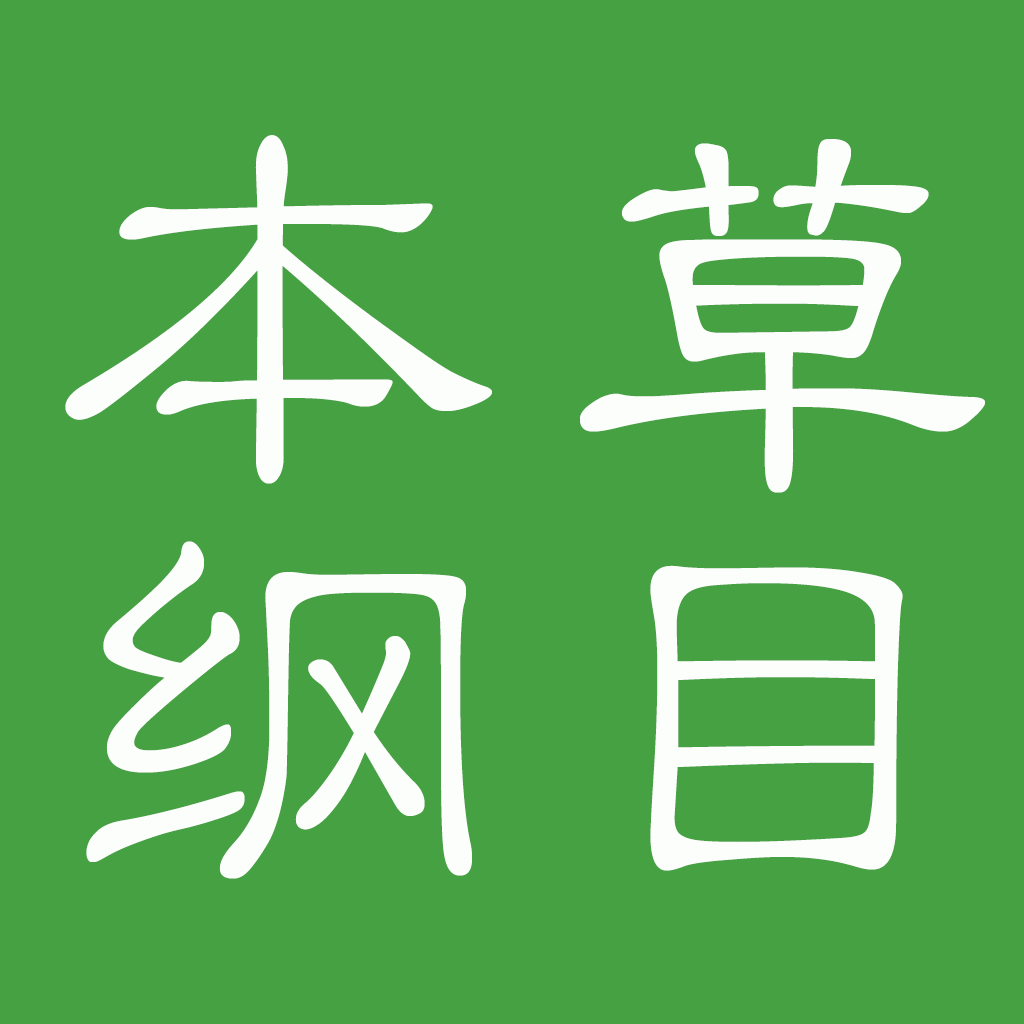
<style>
.page{position:relative;width:1024px;height:1024px;background:#45a142}
.page>*{position:absolute;margin:0}
.t1{font:500px/400px "STLibian-SC-Regular";color:#fbfefb}
</style>
<div class="page">
<p class="t1" style="left:65px;top:135px;width:920px;height:744px;text-align:center">本草<br>纲目</p>
</div>
